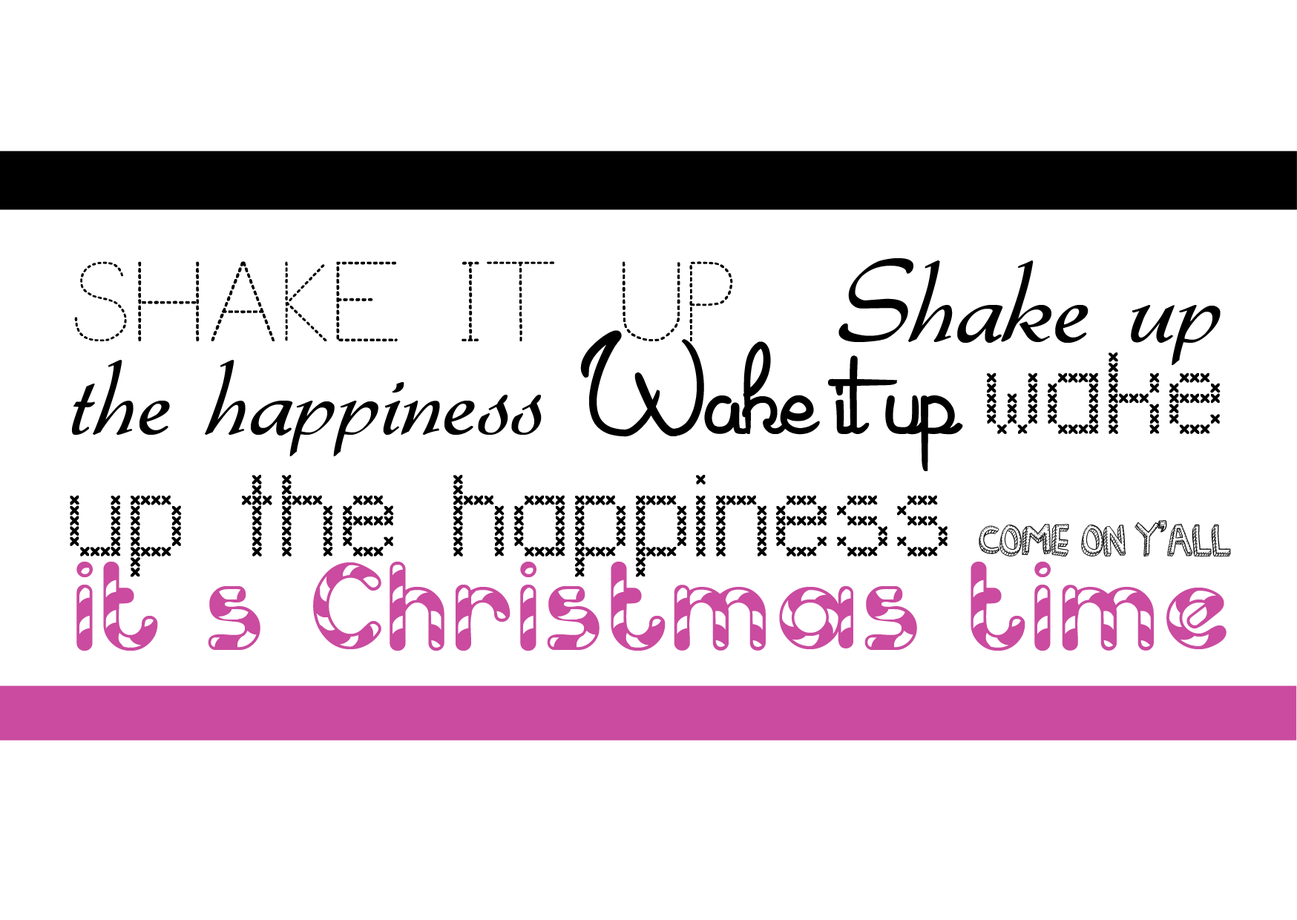
<style>
.page{position:relative;width:1297px;height:920px;background:#ffffff}
.page>*{position:absolute;margin:0}
.t1{font:129.8px/92.7px "CandyCaneUnregistered";color:#ca4b9f}
.t2{font:111.3px/34px "TraceFontforKids";color:#000000}
.t3{font:120.5px/34px "Gabrielle";color:#000000}
.t4{font:111.3px/92.7px "Gabrielle";color:#000000}
.t5{font:108.2px/92.7px "Marguerite";color:#000000}
.t6{font:102px/92.7px "LLXMas";color:#000000}
.t7{font:102px "LLXMas";color:#000000}
.t8{font:46.4px "DenneFreakshow";color:#000000}
.t9{font:129.8px/92.7px "CandyCaneUnregistered";color:#000000}
</style>
<div class="page">
<p class="t1" style="left:70px;top:258px;width:1161px;height:392px"><span class="t2">SHAKE IT UP  </span><span class="t3">Shake up </span><span class="t4">the happiness </span><span class="t5">Wake it up </span><span class="t6">wake </span><span class="t7">up the happiness </span><span class="t8">Come on y’all<br></span>it’s Christmas time <span class="t9">!</span></p>
</div>
